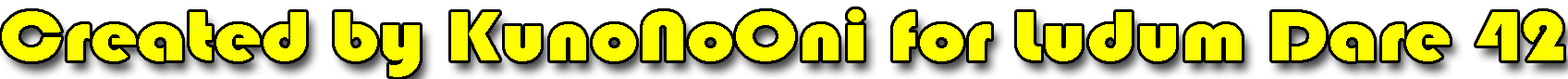
<style>
.page{position:relative;width:1568px;height:79px;background:#ffffff}
.page>*{position:absolute;margin:0}
.t1{font:72.5px "Bauhaus93";color:#ffff00;scale:1.16 1}
</style>
<div class="page">
<p class="t1" style="left:2px;top:9px;width:1561px;height:68px">Created by KunoNoOni for Ludum Dare 42</p>
</div>
